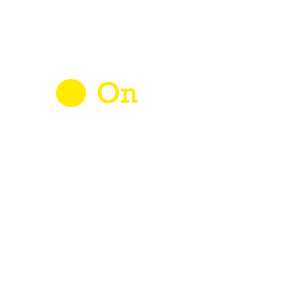
<style>
.page{position:relative;width:300px;height:300px;background:#ffffff}
.page>*{position:absolute;margin:0}
.t1{font:30px "Rockwell";color:#ffea00}
</style>
<div class="page">
<p class="t1" style="left:97px;top:82px;width:41px;height:22px">On</p>
</div>
